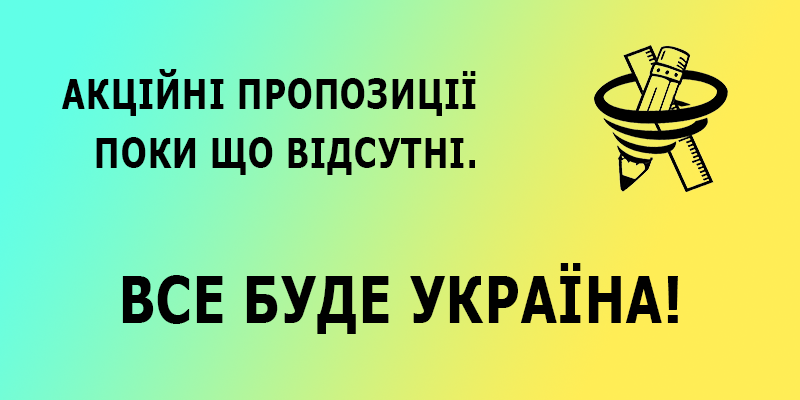
<style>
.page{position:relative;width:800px;height:400px}
.page>*{position:absolute;margin:0}
.t1{font:41.1px/58.7px "Tahoma-Bold";letter-spacing:0.04em;color:#000000;text-transform:uppercase;scale:0.81 1}
.t2{font:63.9px "Tahoma-Bold";letter-spacing:0.04em;color:#000000;scale:0.81 1}
</style>
<div class="page">
<p class="t1" style="left:62px;top:69px;width:414px;height:106px;text-align:right">Акційні пропозиції <br>поки що відсутні.</p>
<p class="t2" style="left:122px;top:263px;width:556px;height:71px">ВСЕ БУДЕ УКРАЇНА!</p>
</div>
